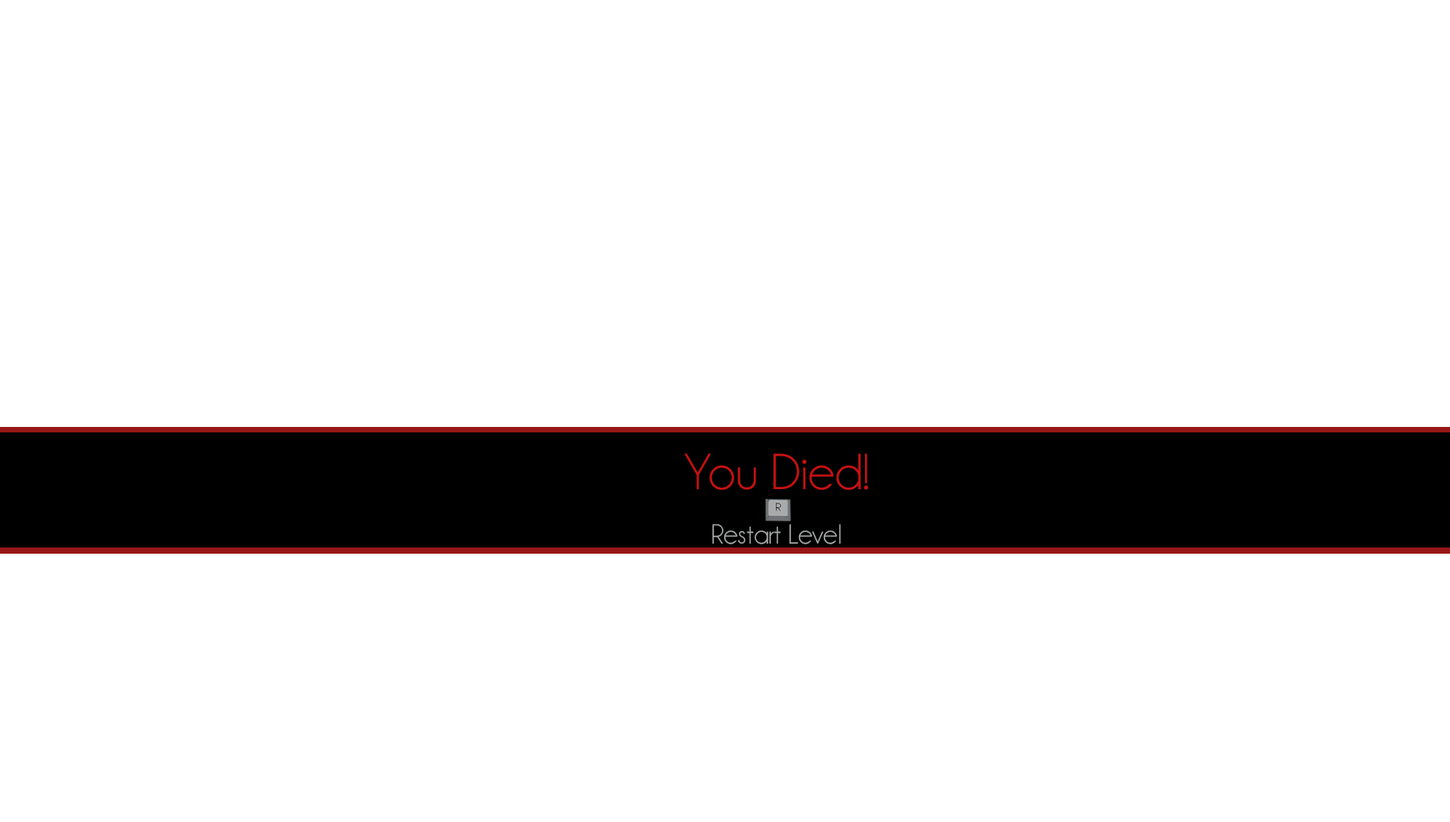
<style>
.page{position:relative;width:1450px;height:822px;background:#ffffff}
.page>*{position:absolute;margin:0}
.t1{font:51.2px "Champagne&Limousines";color:#c81111}
.t2{font:28px "Champagne&Limousines";color:#a8aaab}
</style>
<div class="page">
<p class="t1" style="left:685px;top:454px;width:183px;height:36px">You Died!</p>
<p class="t2" style="left:712px;top:524px;width:129px;height:21px">Restart Level</p>
</div>
